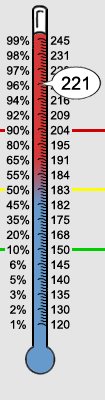
<style>
.page{position:relative;width:105px;height:400px;background:#e5e5e5}
.page>*{position:absolute;margin:0}
.t1{font:11.7px/14.9px "ArialMT";color:#000000}
.t2{font:18px "ArialMT";color:#000000}
</style>
<div class="page">
<p class="t1" style="left:6px;top:36px;width:24px;height:293px;text-align:center">99%<br>98%<br>97%<br>96%<br>94%<br>92%<br>90%<br>80%<br>65%<br>55%<br>50%<br>45%<br>35%<br>20%<br>10%<br>6%<br>5%<br>3%<br>2%<br>1%</p>
<p class="t1" style="left:50px;top:36px;width:20px;height:293px;text-align:center">245<br>231<br>228<br>221<br>216<br>209<br>204<br>195<br>191<br>184<br>183<br>182<br>175<br>168<br>150<br>145<br>140<br>135<br>130<br>120</p>
<p class="t2" style="left:61px;top:76px;width:27px;height:14px">221</p>
</div>
